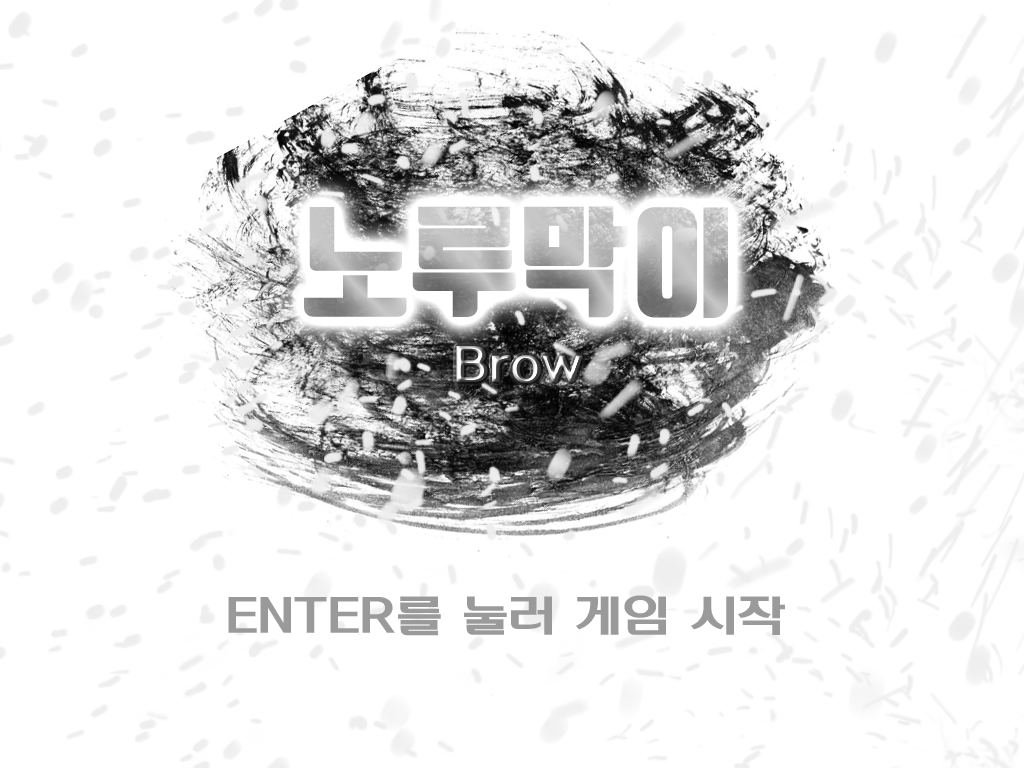
<style>
.page{position:relative;width:1024px;height:768px;background:#ffffff}
.page>*{position:absolute;margin:0}
.t1{font:120px "TmonMonsoriBlack"}
.t2{font:48px "KoreanHDRI-B"}
.t3{font:48px "KoreanHDRI-B";color:#9a9a9a}
</style>
<div class="page">
<p class="t1" style="left:412px;top:206px;width:104px;height:111px">루</p>
<p class="t1" style="left:524px;top:206px;width:106px;height:112px">막</p>
<p class="t1" style="left:637px;top:207px;width:91px;height:111px">이</p>
<p class="t2" style="left:456px;top:346px;width:127px;height:37px">Brow</p>
<p class="t3" style="left:228px;top:595px;width:557px;height:41px">ENTER를 눌러 게임 시작</p>
</div>
